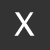
<style>
.page{position:relative;width:50px;height:50px;background:#333333}
.page>*{position:absolute;margin:0}
.t1{font:35px "BMHANNAAir";letter-spacing:0.06em;color:#ffffff}
</style>
<div class="page">
<p class="t1" style="left:14px;top:12px;width:21px;height:24px">X</p>
</div>
